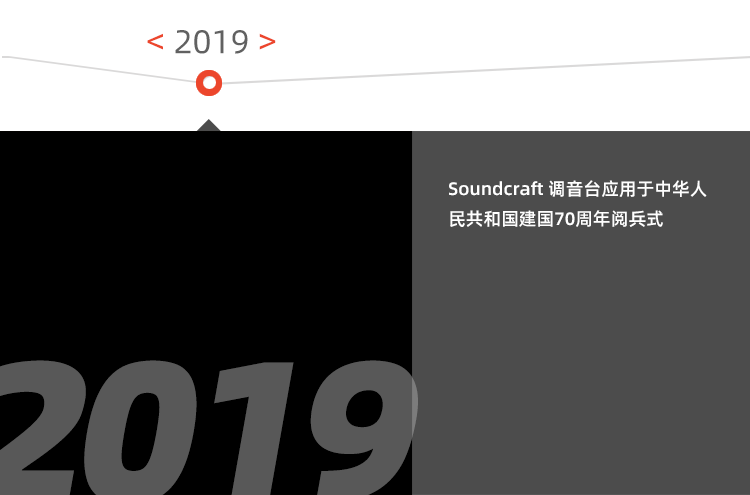
<style>
.page{position:relative;width:750px;height:495px;background:#4c4c4c}
.page>*{position:absolute;margin:0}
.t1{font:18px/30px "AlibabaPuHuiTi-Medium";color:#ffffff}
</style>
<div class="page">
<p class="t1" style="left:449px;top:180px;width:258px;height:47px">Soundcraft 调音台应用于中华人民共和国建国70周年阅兵式</p>
</div>
